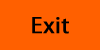
<style>
.page{position:relative;width:100px;height:50px;background:#ff6000}
.page>*{position:absolute;margin:0}
.t1{font:23.9px "MyriadPro-Regular";color:#000000;font-weight:bold}
.t2{font:23.9px "MyriadPro-Regular";color:#000000}
</style>
<div class="page">
<p class="t1" style="left:32px;top:17px;width:37px;height:17px"><span class="t2"><br></span>Exit</p>
</div>
